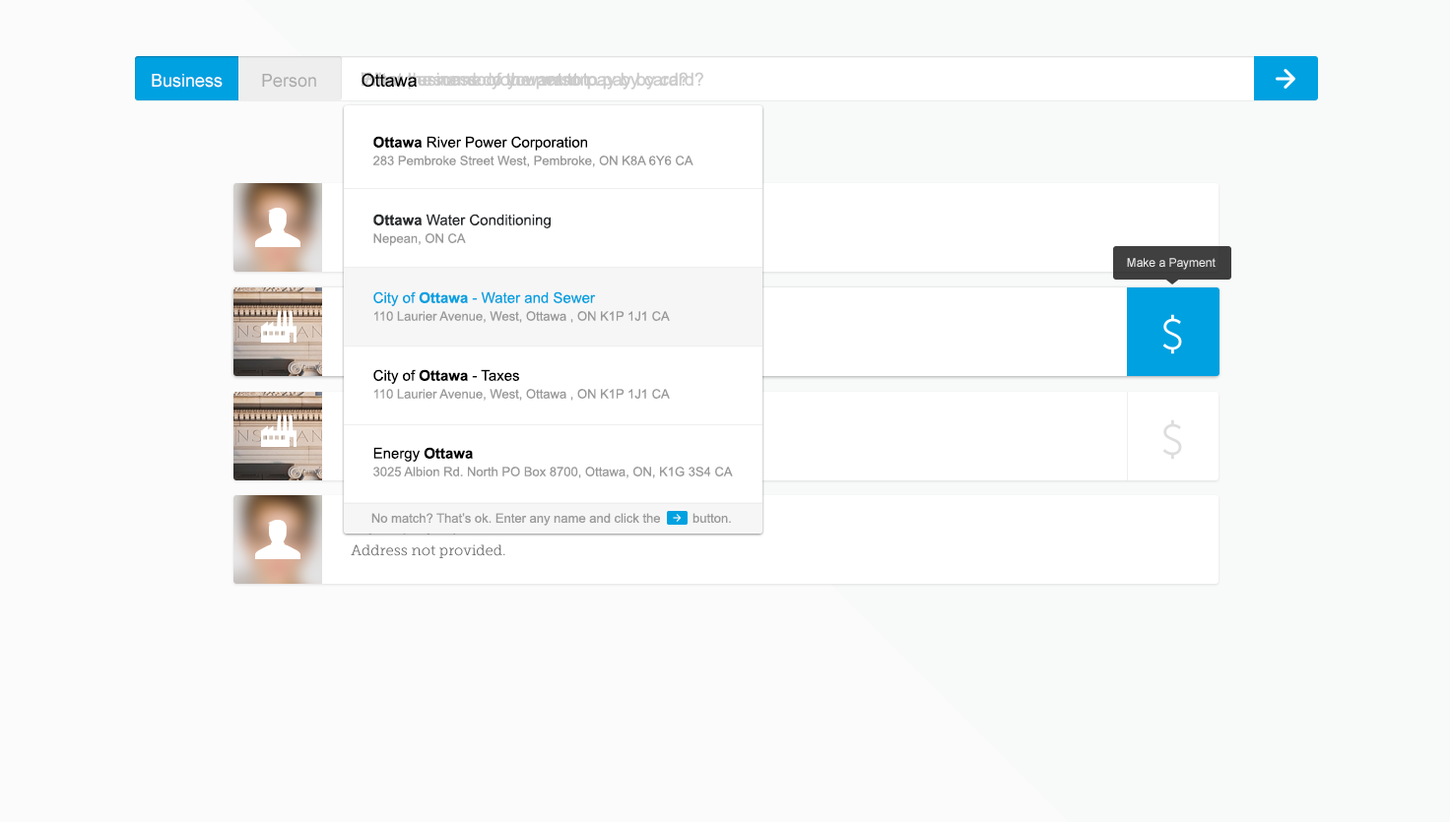
<style>
.page{position:relative;width:1450px;height:822px;background:#fbfbfb}
.page>*{position:absolute;margin:0}
.t1{font:17.7px "ArialMT";color:#ffffff}
.t2{font:17.7px "ArialMT";color:#aaaaaa}
.t3{font:17.7px "ArialMT";color:#cccccc}
.t4{font:17.7px "ArialMT";color:#000000}
.t5{font:12.8px/17.7px "ArialMT";color:#999999}
.t6{font:14.8px/35.5px "Arial-BoldMT";color:#000000}
.t7{font:14.8px/35.5px "ArialMT";color:#000000}
.t8{font:14.8px/60.1px "Arial-BoldMT";color:#282b2d}
.t9{font:14.8px/60.1px "ArialMT";color:#282b2d}
.t10{font:14.8px/60.1px "ArialMT";color:#00a1e1}
.t11{font:14.8px/60.1px "Arial-BoldMT";color:#00a1e1}
.t12{font:14.8px/60.1px "ArialMT";color:#000000}
.t13{font:14.8px/60.1px "Arial-BoldMT";color:#000000}
.t14{font:11.8px "ArialMT";color:#eeeeee}
.t15{font:14.8px/21.7px "MuseoSlab-300";color:#f6f6f6}
.t16{font:19.7px/21.7px "MuseoSlab-700";color:#f6f6f6}
.t17{font:12.8px "ArialMT";color:#999999}
</style>
<div class="page">
<p class="t1" style="left:152px;top:74px;width:71px;height:14px">Business</p>
<p class="t2" style="left:262px;top:74px;width:54px;height:14px">Person</p>
<p class="t3" style="left:360px;top:72px;width:343px;height:18px">What business do you want to pay by card?</p>
<p class="t3" style="left:360px;top:72px;width:328px;height:18px">What person do you want to pay by card?</p>
<p class="t4" style="left:361px;top:73px;width:56px;height:15px">Ottawa</p>
<p class="t5" style="left:372px;top:136px;width:361px;height:343px"><span class="t6">Ottawa </span><span class="t7">River Power Corporation<br></span>283 Pembroke Street West, Pembroke, ON K8A 6Y6 CA<br><span class="t8">Ottawa </span><span class="t9">Water Conditioning<br></span>Nepean, ON CA<br><span class="t10">City of </span><span class="t11">Ottawa </span><span class="t10">- Water and Sewer<br></span>110 Laurier Avenue, West, Ottawa , ON K1P 1J1 CA<br><span class="t12">City of </span><span class="t13">Ottawa </span><span class="t12">- Taxes<br></span>110 Laurier Avenue, West, Ottawa , ON K1P 1J1 CA<br><span class="t12">Energy </span><span class="t13">Ottawa<br></span>3025 Albion Rd. North PO Box 8700, Ottawa, ON, K1G 3S4 CA</p>
<p class="t14" style="left:1127px;top:258px;width:88px;height:12px">Make a Payment</p>
<p class="t15" style="left:351px;top:519px;width:154px;height:39px"><span class="t16">Daniel Choi<br></span>Address not provided.</p>
<p class="t17" style="left:371px;top:513px;width:360px;height:13px">No match? That’s ok. Enter any name and click the         button.</p>
</div>
